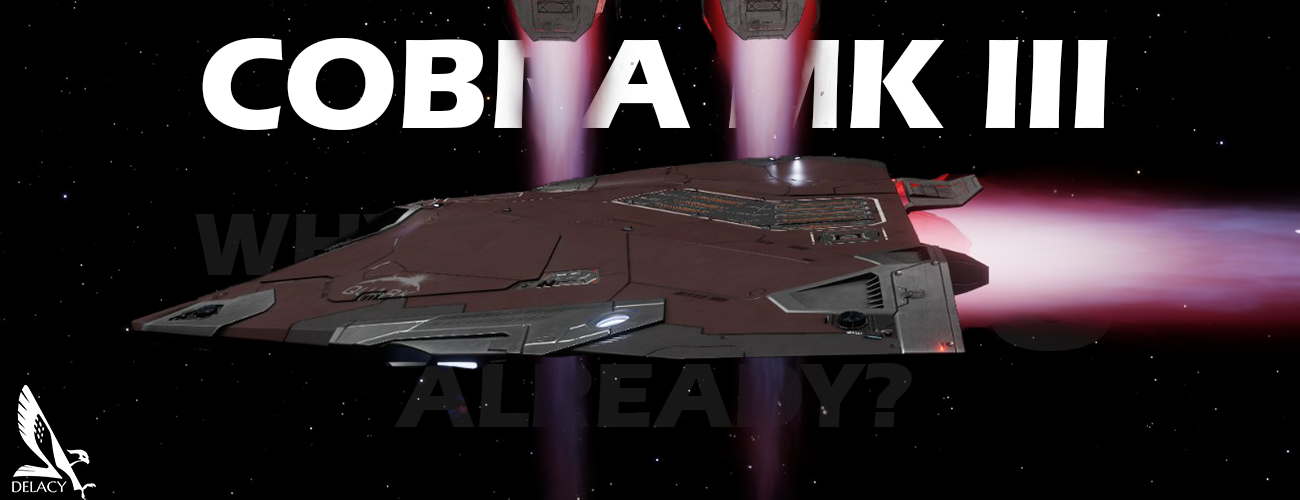
<style>
.page{position:relative;width:1300px;height:500px;background:#000000}
.page>*{position:absolute;margin:0}
.t1{font:132.4px "ErasITC-Bold";color:#ffffff}
.t2{font:94px "ErasITC-Bold";color:#171717}
</style>
<div class="page">
<p class="t1" style="left:202px;top:38px;width:906px;height:92px">COBRA MK III</p>
<p class="t2" style="left:394px;top:363px;width:518px;height:64px">ALREADY?</p>
</div>
